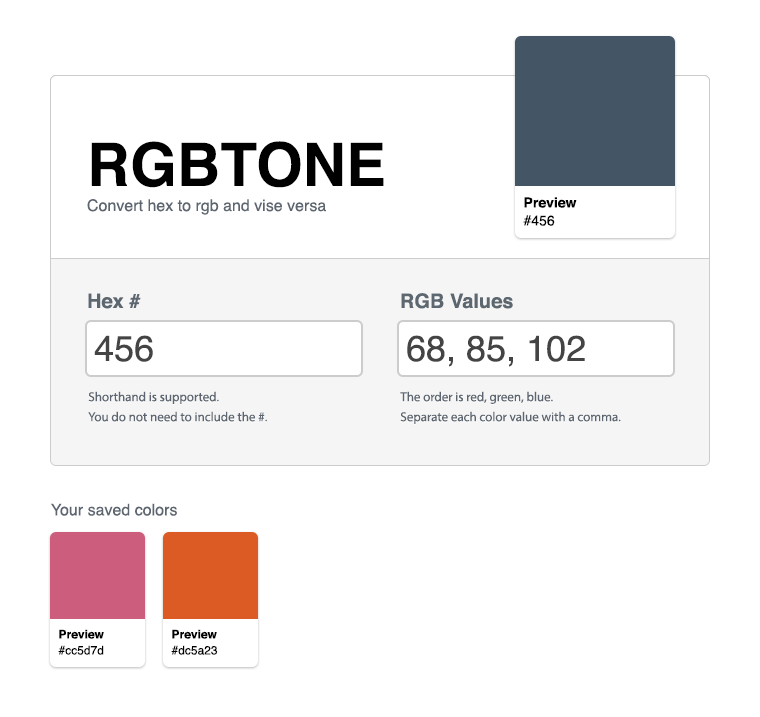
<style>
.page{position:relative;width:760px;height:717px;background:#ffffff}
.page>*{position:absolute;margin:0}
.t1{font:16px/25px "Helvetica";color:#5d6670}
.t2{font:60px/25px "Helvetica-Bold";color:#000000}
.t3{font:14px/18px "Helvetica-Bold";color:#000000}
.t4{font:14px/18px "Helvetica";color:#000000}
.t5{font:20px "Helvetica-Bold";color:#5d6770}
.t6{font:36px "Helvetica";color:#444444}
.t7{font:13px/20px "MyriadPro-Regular";color:#5d6670}
.t8{font:16px "Helvetica";color:#5d6670}
.t9{font:12px/16px "Helvetica-Bold";color:#000000}
.t10{font:12px/16px "Helvetica";color:#000000}
</style>
<div class="page">
<p class="t1" style="left:87px;top:141px;width:297px;height:74px"><span class="t2">RGBTONE<br></span>Convert hex to rgb and vise versa</p>
<p class="t3" style="left:523px;top:197px;width:54px;height:29px">Preview<br><span class="t4">#456</span></p>
<p class="t5" style="left:88px;top:293px;width:53px;height:16px">Hex #</p>
<p class="t5" style="left:401px;top:293px;width:112px;height:16px">RGB Values</p>
<p class="t6" style="left:94px;top:335px;width:59px;height:27px">456</p>
<p class="t6" style="left:407px;top:335px;width:178px;height:32px">68, 85, 102</p>
<p class="t7" style="left:88px;top:391px;width:179px;height:31px">Shorthand is supported.<br>You do not need to include the #.</p>
<p class="t7" style="left:400px;top:391px;width:221px;height:33px">The order is red, green, blue.<br>Separate each color value with a comma.</p>
<p class="t8" style="left:51px;top:503px;width:126px;height:13px">Your saved colors</p>
<p class="t9" style="left:58px;top:629px;width:46px;height:26px">Preview<br><span class="t10">#cc5d7d</span></p>
<p class="t9" style="left:171px;top:629px;width:47px;height:26px">Preview<br><span class="t10">#dc5a23</span></p>
</div>
